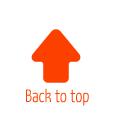
<style>
.page{position:relative;width:113px;height:113px;background:#ffffff}
.page>*{position:absolute;margin:0}
.t1{font:18px "YanoneKaffeesatz-Light";color:#fc4000}
</style>
<div class="page">
<p class="t1" style="left:26px;top:88px;width:63px;height:18px">Back to top</p>
</div>
